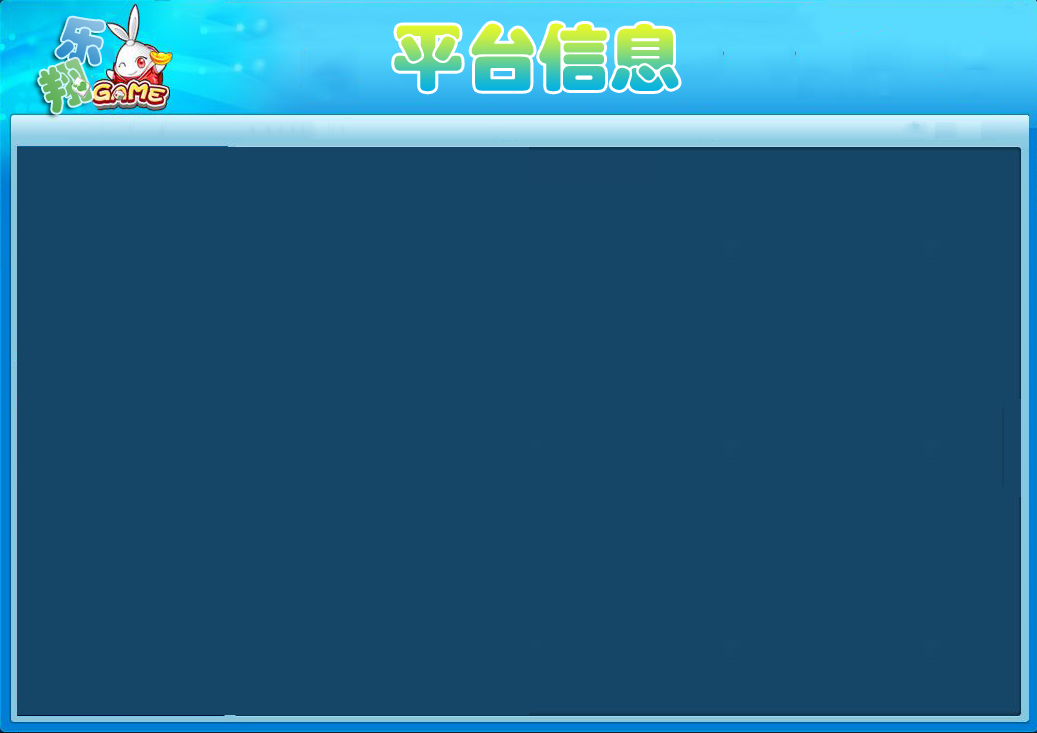
<style>
.page{position:relative;width:1037px;height:733px;background:#154667}
.page>*{position:absolute;margin:0}
.t1{font:72px "STHupo"}
</style>
<div class="page">
<p class="t1" style="left:394px;top:23px;width:285px;height:69px">平台信息</p>
</div>
